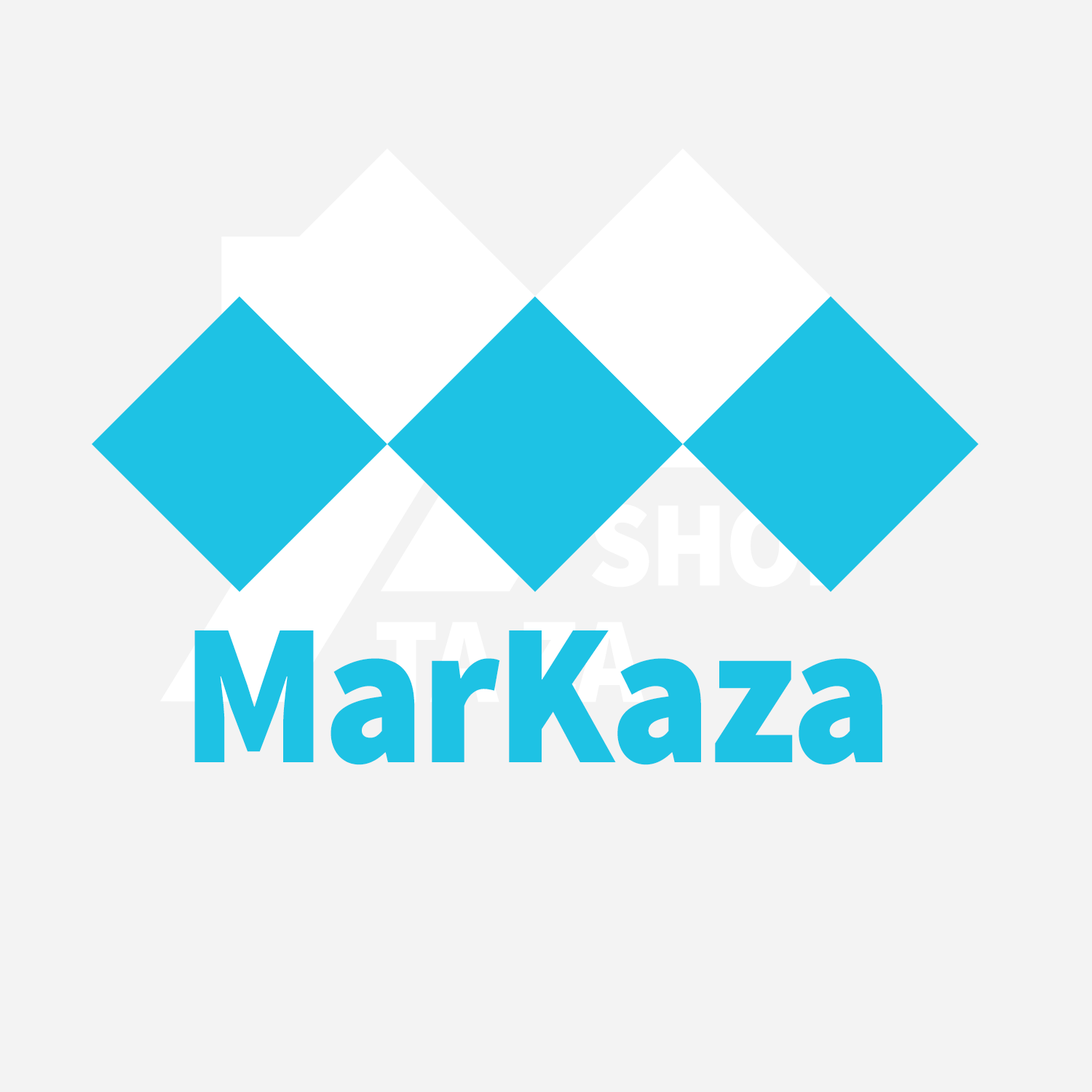
<style>
.page{position:relative;width:1092px;height:1092px;background:#f3f3f3}
.page>*{position:absolute;margin:0}
.t1{font:122.6px "SourceSansPro-Black";letter-spacing:-0.02em;color:#ffffff;scale:0.93 1}
.t2{font:202.2px "SourceSansPro-Black";letter-spacing:-0.02em;color:#1ec2e4;scale:0.93 1}
</style>
<div class="page">
<p class="t1" style="left:376px;top:622px;width:268px;height:81px">TA ZA</p>
<p class="t2" style="left:194px;top:630px;width:688px;height:135px">MarKaza</p>
</div>
